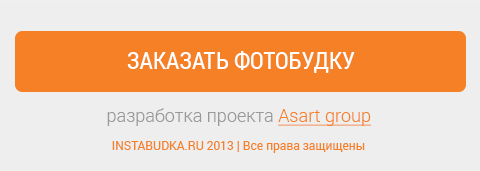
<style>
.page{position:relative;width:480px;height:171px;background:#eeeeee}
.page>*{position:absolute;margin:0}
.t1{font:24px "RobotoCondensed-Regular";color:#ffffff;text-transform:uppercase}
.t2{font:18px "Roboto-Light";color:#999999}
.t3{font:18px "Roboto-Light";color:#f58026;text-decoration:underline}
.t4{font:12px "Roboto-Regular";color:#f58026}
</style>
<div class="page">
<p class="t1" style="left:127px;top:51px;width:228px;height:22px">заказать фотобудку</p>
<p class="t2" style="left:107px;top:108px;width:265px;height:18px">разработка проекта <span class="t3">Asart group</span></p>
<p class="t4" style="left:112px;top:141px;width:253px;height:12px">INSTABUDKA.RU 2013 | Все права защищены</p>
</div>
